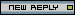
<style>
.page{position:relative;width:75px;height:15px;background:#cdcdcd}
.page>*{position:absolute;margin:0}
.t1{font:8px "BitDustTwo";color:#000000}
</style>
<div class="page">
<p class="t1" style="left:9px;top:5px;width:49px;height:5px">NEW REPLY</p>
</div>
